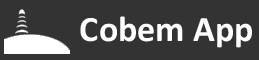
<style>
.page{position:relative;width:259px;height:60px;background:#333333}
.page>*{position:absolute;margin:0}
.t1{font:36px "Calibri-Bold";color:#ffffff}
</style>
<div class="page">
<p class="t1" style="left:80px;top:16px;width:172px;height:32px">Cobem App</p>
</div>
